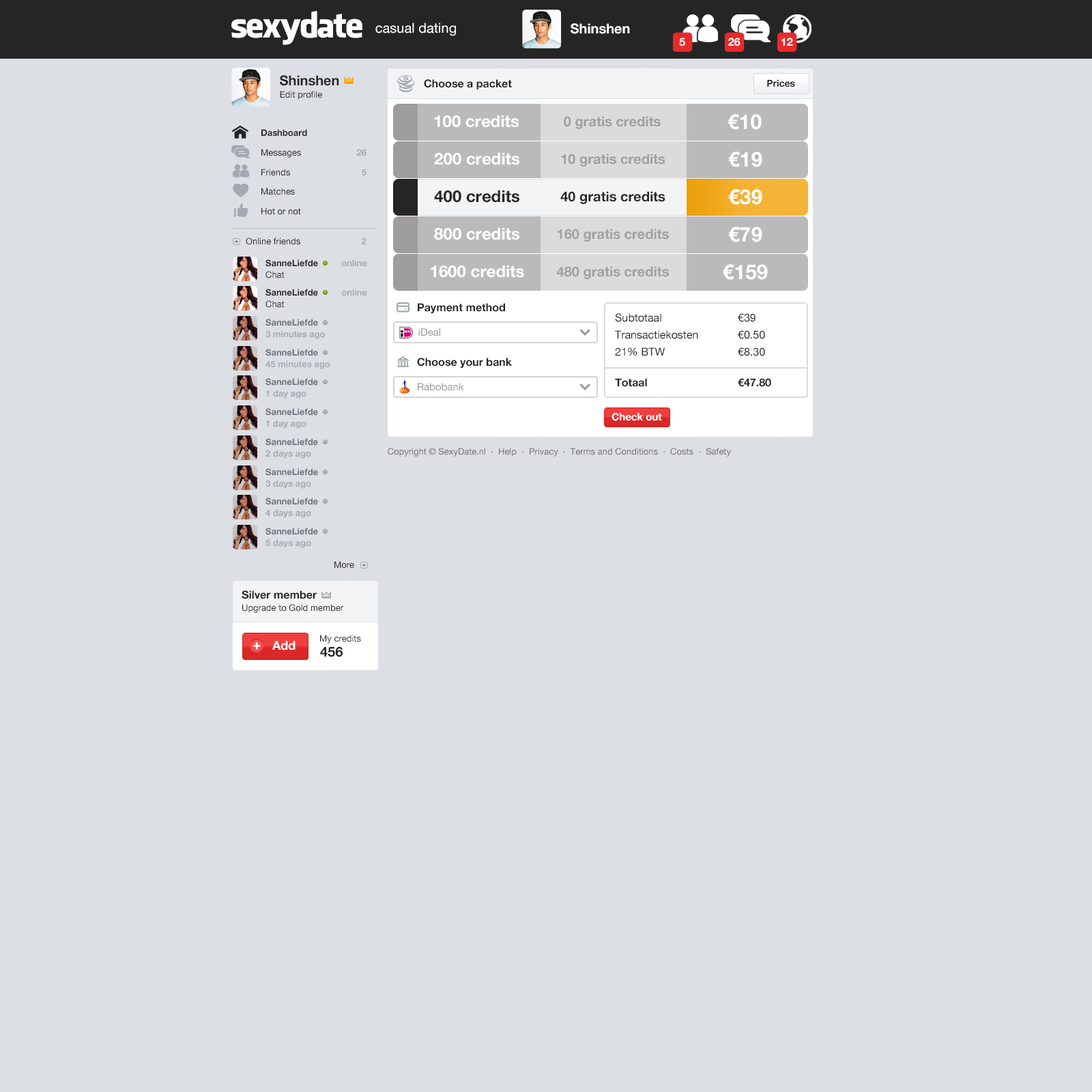
<style>
.page{position:relative;width:1092px;height:1092px;background:#dcdfe3}
.page>*{position:absolute;margin:0}
.t1{font:34.1px "FacebookLetterFaces";letter-spacing:-0.05em;color:#ffffff}
.t2{font:13.6px "HelveticaNeue";color:#ffffff}
.t3{font:13.6px "HelveticaNeue-Bold";color:#ffffff}
.t4{font:10.9px "HelveticaNeue-Bold";color:#ffffff}
.t5{font:13.6px "HelveticaNeue-Bold";color:#252525}
.t6{font:10.9px "HelveticaNeue-Bold";color:#252525}
.t7{font:9.6px "HelveticaNeue-Bold";color:#252525}
.t8{font:8.9px "HelveticaNeue";color:#252525}
.t9{font:20.5px "HelveticaNeue-Bold";color:#ffffff}
.t10{font:16.4px "HelveticaNeue-Bold";color:#ffffff}
.t11{font:13.6px "HelveticaNeue-Bold";color:#9f9f9f}
.t12{font:8.9px/19.7px "HelveticaNeue";color:#252525}
.t13{font:8.9px/19.7px "HelveticaNeue-Bold";color:#252525}
.t14{font:8.9px/19.7px "HelveticaNeue-Bold";color:#a5aab2}
.t15{font:16.4px "HelveticaNeue-Bold";color:#252525}
.t16{font:8.9px "HelveticaNeue-Bold";color:#a5aab2}
.t17{font:8.9px/11.6px "HelveticaNeue-Bold";color:#252525}
.t18{font:8.9px/11.6px "HelveticaNeue-Bold";color:#a5aab2}
.t19{font:8.9px/11.6px "HelveticaNeue";color:#252525}
.t20{font:10.9px/17.1px "HelveticaNeue";color:#252525}
.t21{font:10.9px/13.6px "HelveticaNeue-Bold";color:#252525}
.t22{font:8.9px/11.6px "HelveticaNeue-Bold";color:#6d727b}
.t23{font:10.2px "HelveticaNeue";color:#999898}
.t24{font:10.2px "HelveticaNeue-Bold";color:#ffffff}
.t25{font:8.9px "HelveticaNeue";color:#707070}
.t26{font:12.3px "HelveticaNeue-Bold";color:#ffffff}
.t27{font:13px "HelveticaNeue-Bold";color:#ffffff;font-weight:bold}
</style>
<div class="page">
<p class="t1" style="left:231px;top:11px;width:131px;height:34px">sexydate</p>
<p class="t2" style="left:375px;top:23px;width:81px;height:13px">casual dating</p>
<p class="t3" style="left:571px;top:23px;width:59px;height:11px">Shinshen</p>
<p class="t4" style="left:679px;top:38px;width:6px;height:8px">5</p>
<p class="t4" style="left:728px;top:38px;width:13px;height:8px">26</p>
<p class="t4" style="left:781px;top:38px;width:12px;height:8px">12</p>
<p class="t5" style="left:280px;top:75px;width:59px;height:11px">Shinshen</p>
<p class="t6" style="left:424px;top:79px;width:88px;height:10px">Choose a packet</p>
<p class="t7" style="left:767px;top:80px;width:28px;height:7px">Prices</p>
<p class="t8" style="left:280px;top:91px;width:42px;height:9px">Edit profile</p>
<p class="t9" style="left:728px;top:114px;width:34px;height:16px">€10</p>
<p class="t10" style="left:434px;top:115px;width:85px;height:13px">100 credits</p>
<p class="t11" style="left:564px;top:116px;width:97px;height:13px">0 gratis credits</p>
<p class="t12" style="left:261px;top:129px;width:46px;height:86px"><span class="t13">Dashboard<br></span>Messages<br>Friends<br>Matches<br>Hot or not</p>
<p class="t14" style="left:357px;top:149px;width:9px;height:27px;text-align:right">26<br>5</p>
<p class="t10" style="left:434px;top:152px;width:85px;height:13px">200 credits</p>
<p class="t11" style="left:561px;top:154px;width:104px;height:13px">10 gratis credits</p>
<p class="t9" style="left:728px;top:152px;width:34px;height:15px">€19</p>
<p class="t15" style="left:434px;top:190px;width:85px;height:13px">400 credits</p>
<p class="t5" style="left:560px;top:191px;width:105px;height:13px">40 gratis credits</p>
<p class="t9" style="left:728px;top:189px;width:34px;height:16px">€39</p>
<p class="t10" style="left:434px;top:227px;width:85px;height:13px">800 credits</p>
<p class="t11" style="left:558px;top:229px;width:111px;height:13px">160 gratis credits</p>
<p class="t9" style="left:728px;top:227px;width:34px;height:15px">€79</p>
<p class="t8" style="left:246px;top:238px;width:120px;height:7px">Online friends      <span class="t16">2</span></p>
<p class="t17" style="left:265px;top:259px;width:102px;height:19px">SanneLiefde          <span class="t18">online<br></span><span class="t19">Chat</span></p>
<p class="t10" style="left:431px;top:265px;width:93px;height:13px">1600 credits</p>
<p class="t11" style="left:556px;top:266px;width:113px;height:13px">480 gratis credits</p>
<p class="t9" style="left:723px;top:264px;width:45px;height:16px">€159</p>
<p class="t17" style="left:265px;top:289px;width:102px;height:19px">SanneLiefde          <span class="t18">online<br></span><span class="t19">Chat</span></p>
<p class="t6" style="left:418px;top:303px;width:87px;height:10px">Payment method</p>
<p class="t20" style="left:615px;top:313px;width:156px;height:74px">Subtotaal    €39<br>Transactiekosten  €0.50<br>21% BTW   €8.30<br><br><span class="t21">Totaal    €47.80</span></p>
<p class="t18" style="left:265px;top:319px;width:60px;height:20px"><span class="t22">SanneLiefde<br></span>3 minutes ago</p>
<p class="t23" style="left:418px;top:328px;width:22px;height:8px">iDeal</p>
<p class="t18" style="left:265px;top:349px;width:65px;height:20px"><span class="t22">SanneLiefde<br></span>45 minutes ago</p>
<p class="t6" style="left:417px;top:358px;width:95px;height:10px">Choose your bank</p>
<p class="t22" style="left:265px;top:378px;width:53px;height:21px">SanneLiefde<br><span class="t18">1 day ago</span></p>
<p class="t23" style="left:418px;top:383px;width:46px;height:7px">Rabobank</p>
<p class="t22" style="left:265px;top:408px;width:53px;height:21px">SanneLiefde<br><span class="t18">1 day ago</span></p>
<p class="t24" style="left:612px;top:413px;width:50px;height:8px">Check out</p>
<p class="t22" style="left:265px;top:438px;width:53px;height:21px">SanneLiefde<br><span class="t18">2 days ago</span></p>
<p class="t25" style="left:388px;top:448px;width:343px;height:9px">Copyright © SexyDate.nl  ·  Help  ·  Privacy  ·  Terms and Conditions  ·  Costs  ·  Safety</p>
<p class="t22" style="left:265px;top:468px;width:53px;height:21px">SanneLiefde<br><span class="t18">3 days ago</span></p>
<p class="t22" style="left:265px;top:498px;width:53px;height:20px">SanneLiefde<br><span class="t18">4 days ago</span></p>
<p class="t22" style="left:265px;top:528px;width:53px;height:20px">SanneLiefde<br><span class="t18">5 days ago</span></p>
<p class="t8" style="left:334px;top:561px;width:20px;height:8px">More</p>
<p class="t6" style="left:242px;top:590px;width:75px;height:9px">Silver member</p>
<p class="t8" style="left:242px;top:604px;width:101px;height:9px">Upgrade to Gold member</p>
<p class="t26" style="left:272px;top:641px;width:24px;height:9px">Add</p>
<p class="t8" style="left:320px;top:635px;width:41px;height:9px">My credits</p>
<p class="t27" style="left:253px;top:642px;width:8px;height:8px">+</p>
<p class="t5" style="left:320px;top:646px;width:23px;height:11px">456</p>
</div>
